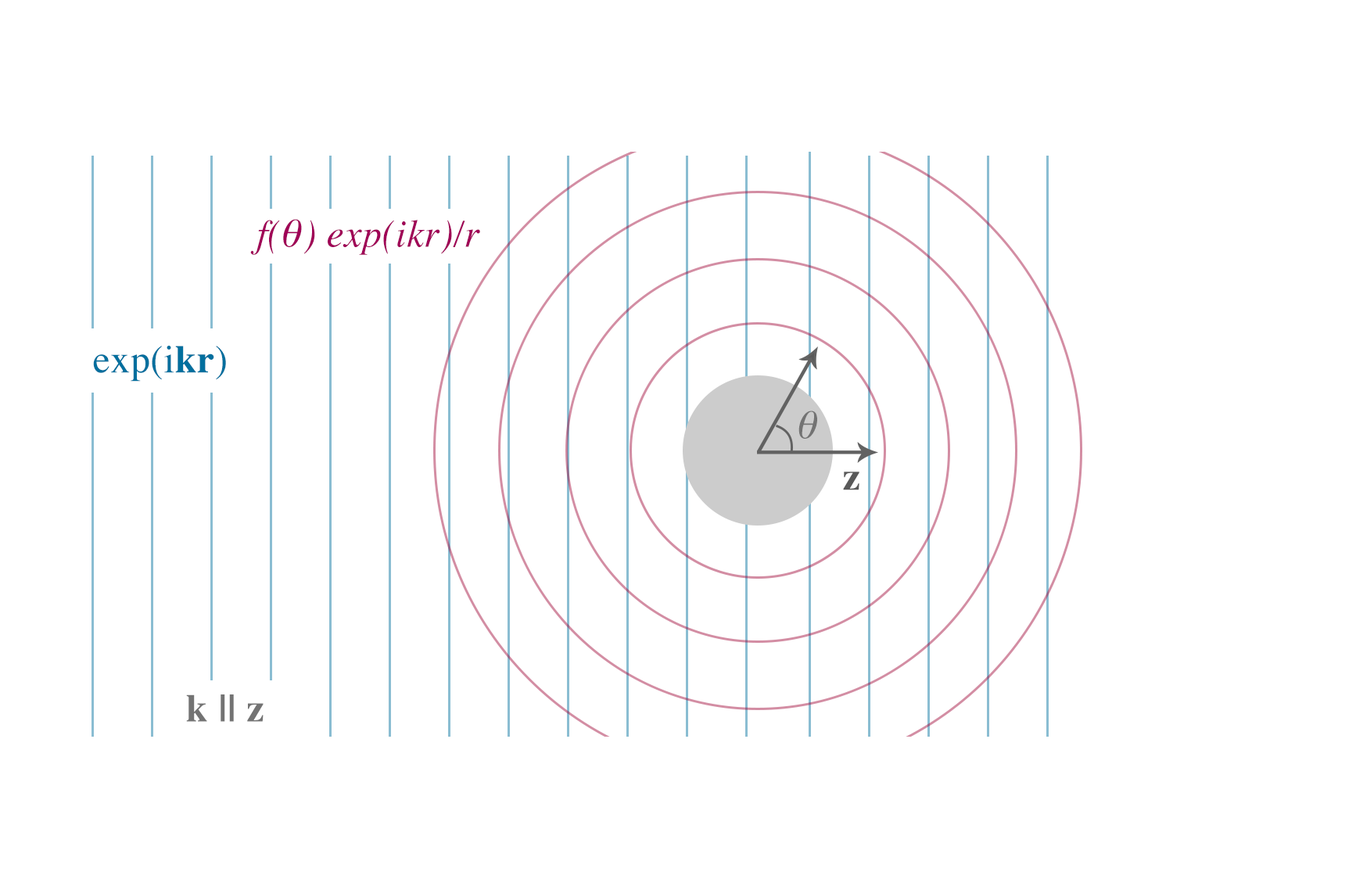
<style>
.page{position:relative;width:1356px;height:879px;background:#ffffff}
.page>*{position:absolute;margin:0}
.t1{font:39.1px "Times-Italic";letter-spacing:0.01em;color:#a00057}
.t2{font:39.1px "Times-Roman";letter-spacing:0.01em;color:#006f9e}
.t3{font:39.1px "Times-Bold";letter-spacing:0.01em;color:#006f9e}
.t4{font:39.1px "Times-Italic";letter-spacing:0.01em;color:#737373}
.t5{font:39.1px "Times-Bold";letter-spacing:0.01em;color:#595959}
.t6{font:39.1px "Times-Bold";letter-spacing:0.01em;color:#737373}
</style>
<div class="page">
<p class="t1" style="left:250px;top:219px;width:230px;height:36px">f(θ) exp(ikr)/r</p>
<p class="t2" style="left:93px;top:346px;width:133px;height:36px">exp(i<span class="t3">kr</span>)</p>
<p class="t4" style="left:799px;top:411px;width:18px;height:28px">θ</p>
<p class="t5" style="left:843px;top:472px;width:17px;height:18px">z</p>
<p class="t6" style="left:186px;top:695px;width:78px;height:27px">k || z</p>
</div>
